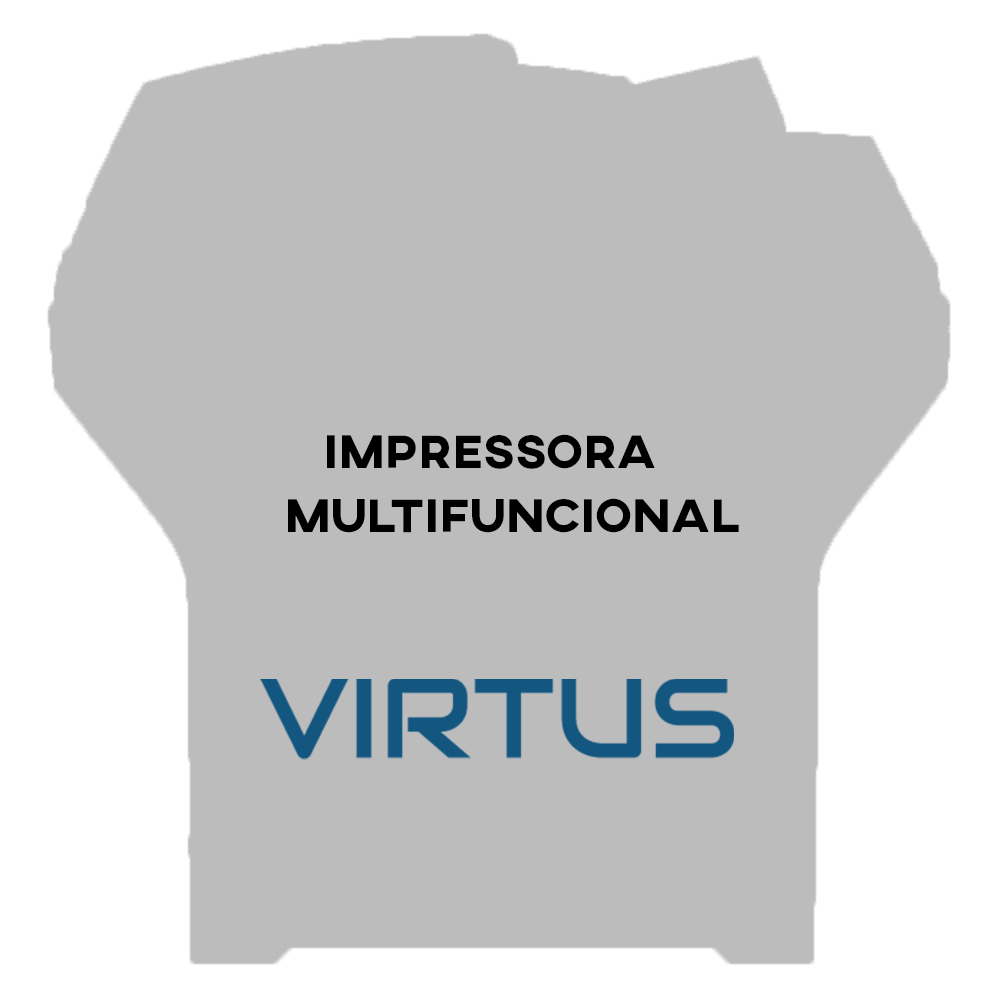
<style>
.page{position:relative;width:1000px;height:1000px;background:#bcbcbc}
.page>*{position:absolute;margin:0}
.t1{font:48px "AXIS-ExtraBold";letter-spacing:-0.005em;color:#000000}
</style>
<div class="page">
<p class="t1" style="left:327px;top:434px;width:328px;height:35px">impressora</p>
<p class="t1" style="left:288px;top:498px;width:451px;height:35px">MULTIFUNCIONAL</p>
</div>
